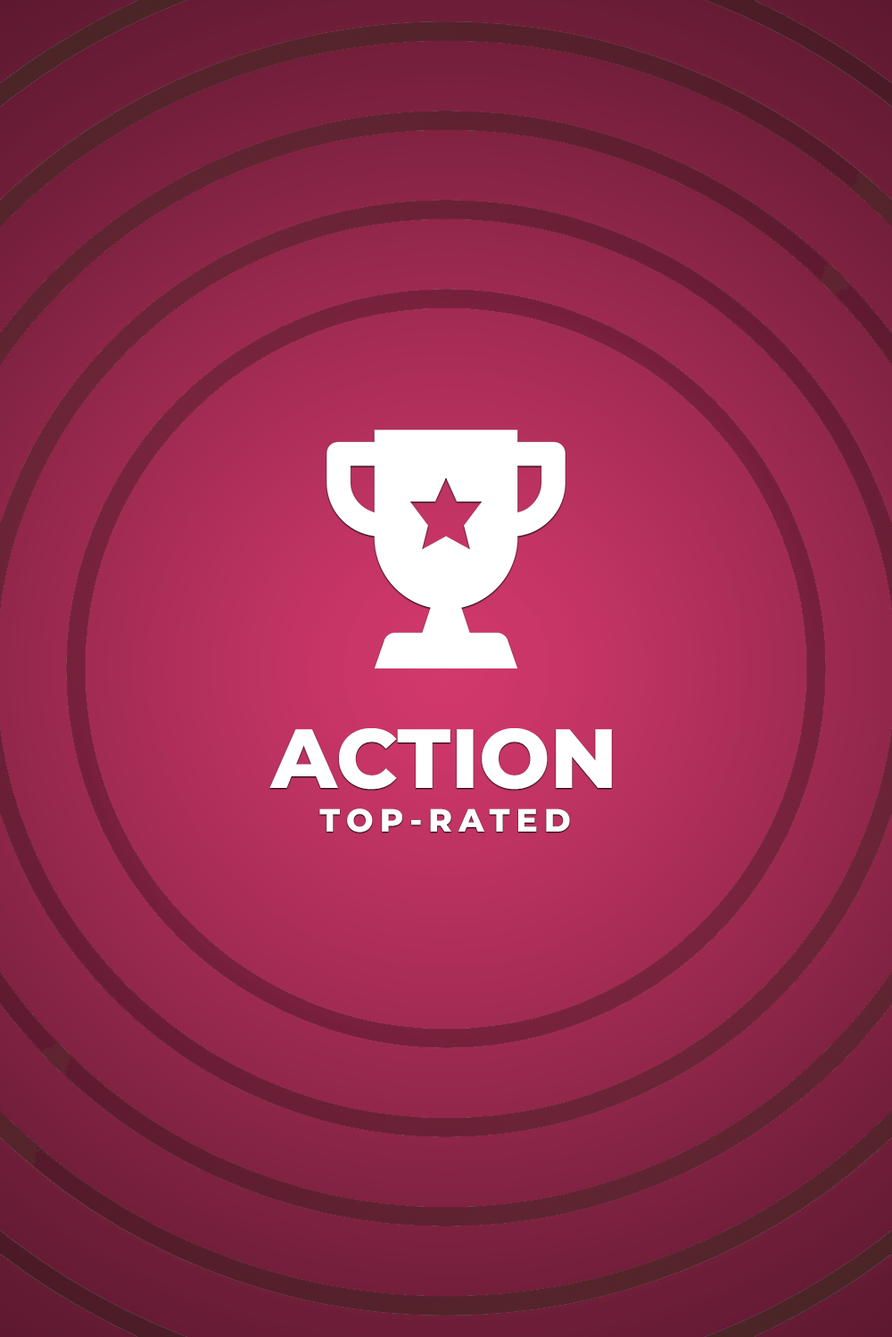
<style>
.page{position:relative;width:892px;height:1337px}
.page>*{position:absolute;margin:0}
.t1{font:83.8px "MontserratRoman-ExtraBold";color:#ffffff}
.t2{font:32.1px "MontserratRoman-ExtraBold";letter-spacing:0.2em;color:#ffffff}
</style>
<div class="page">
<p class="t1" style="left:269px;top:728px;width:343px;height:62px">ACTION</p>
<p class="t2" style="left:319px;top:809px;width:251px;height:24px">TOP-RATED</p>
</div>
